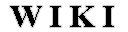
<style>
.page{position:relative;width:128px;height:32px;background:#ffffff}
.page>*{position:absolute;margin:0}
.t1{font:32px "TimesNewRomanPS-BoldMT";letter-spacing:0.25em;color:#000000}
</style>
<div class="page">
<p class="t1" style="left:10px;top:6px;width:104px;height:21px">WIKI</p>
</div>
